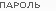
<style>
.page{position:relative;width:56px;height:11px;background:#fbfbfb}
.page>*{position:absolute;margin:0}
.t1{font:9.1px "Calibri";color:#5c5c5c;scale:1.32 1}
</style>
<div class="page">
<p class="t1" style="left:0px;top:2px;width:40px;height:6px">ПАРОЛЬ</p>
</div>
